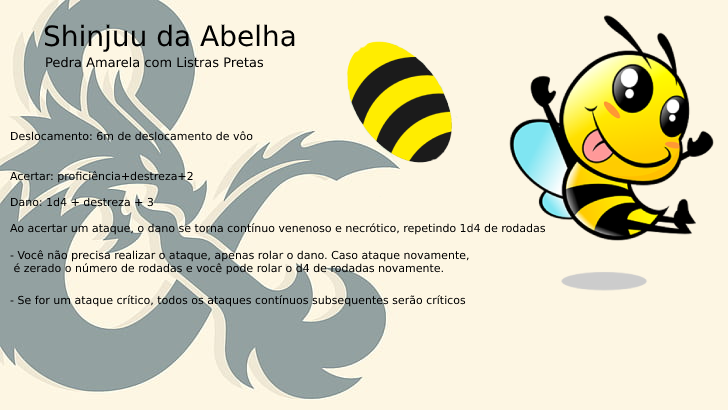
<style>
.page{position:relative;width:728px;height:410px;background:#fdf6e3}
.page>*{position:absolute;margin:0}
.t1{font:28px "DejaVuSans";color:#000000}
.t2{font:13px "DejaVuSans";color:#000000}
.t3{font:11px "DejaVuSans";color:#000000}
</style>
<div class="page">
<p class="t1" style="left:44px;top:24px;width:251px;height:28px">Shinjuu da Abelha</p>
<p class="t2" style="left:46px;top:57px;width:218px;height:11px">Pedra Amarela com Listras Pretas</p>
<p class="t3" style="left:10px;top:131px;width:536px;height:176px">Deslocamento: 6m de deslocamento de vôo<br><br><br>Acertar: proficiência+destreza+2<br><br>Dano: 1d4 + destreza + 3<br><br>Ao acertar um ataque, o dano se torna contínuo venenoso e necrótico, repetindo 1d4 de rodadas<br><br>- Você não precisa realizar o ataque, apenas rolar o dano. Caso ataque novamente,<br> é zerado o número de rodadas e você pode rolar o d4 de rodadas novamente. <br><br>- Se for um ataque crítico, todos os ataques contínuos subsequentes serão críticos</p>
</div>
